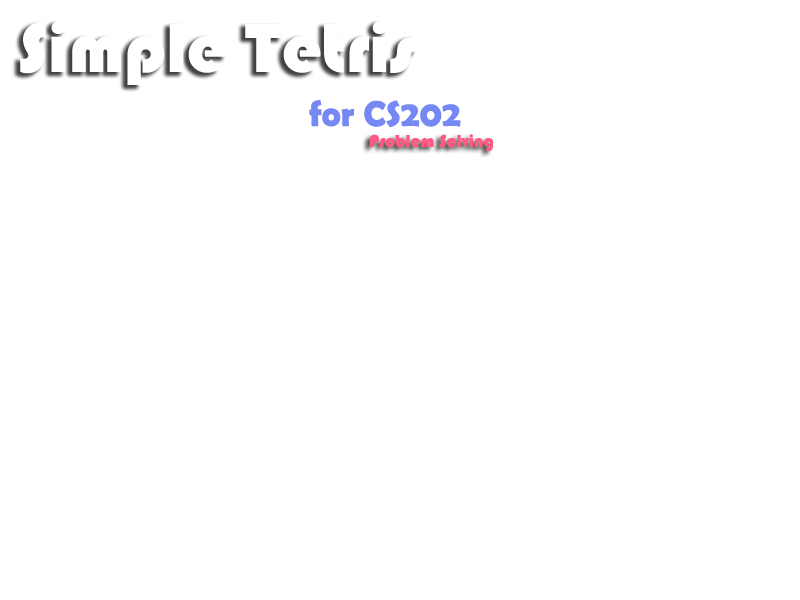
<style>
.page{position:relative;width:800px;height:600px;background:#ffffff}
.page>*{position:absolute;margin:0}
.t1{font:72px "Bauhaus93";color:#ffffff}
.t2{font:36px "BerlinSansFBDemi-Bold";color:#7688f3}
.t3{font:18px "Bauhaus93";color:#fd5b81}
</style>
<div class="page">
<p class="t1" style="left:20px;top:21px;width:396px;height:64px">Simple Tetris</p>
<p class="t2" style="left:309px;top:100px;width:152px;height:27px">for CS202</p>
<p class="t3" style="left:369px;top:134px;width:124px;height:18px">Problem Solving</p>
</div>
